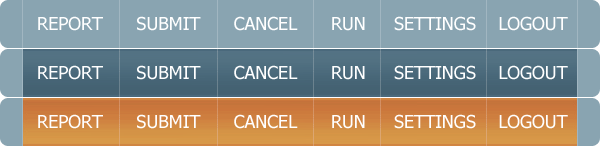
<style>
.page{position:relative;width:600px;height:146px;background:#89a4b1}
.page>*{position:absolute;margin:0}
.t1{font:18px "Tahoma";color:#ffffff}
</style>
<div class="page">
<p class="t1" style="left:38px;top:16px;width:530px;height:15px">REPORT      SUBMIT      CANCEL      RUN     SETTINGS    LOGOUT</p>
<p class="t1" style="left:38px;top:65px;width:530px;height:15px">REPORT      SUBMIT      CANCEL      RUN     SETTINGS    LOGOUT</p>
<p class="t1" style="left:38px;top:114px;width:530px;height:15px">REPORT      SUBMIT      CANCEL      RUN     SETTINGS    LOGOUT</p>
</div>
